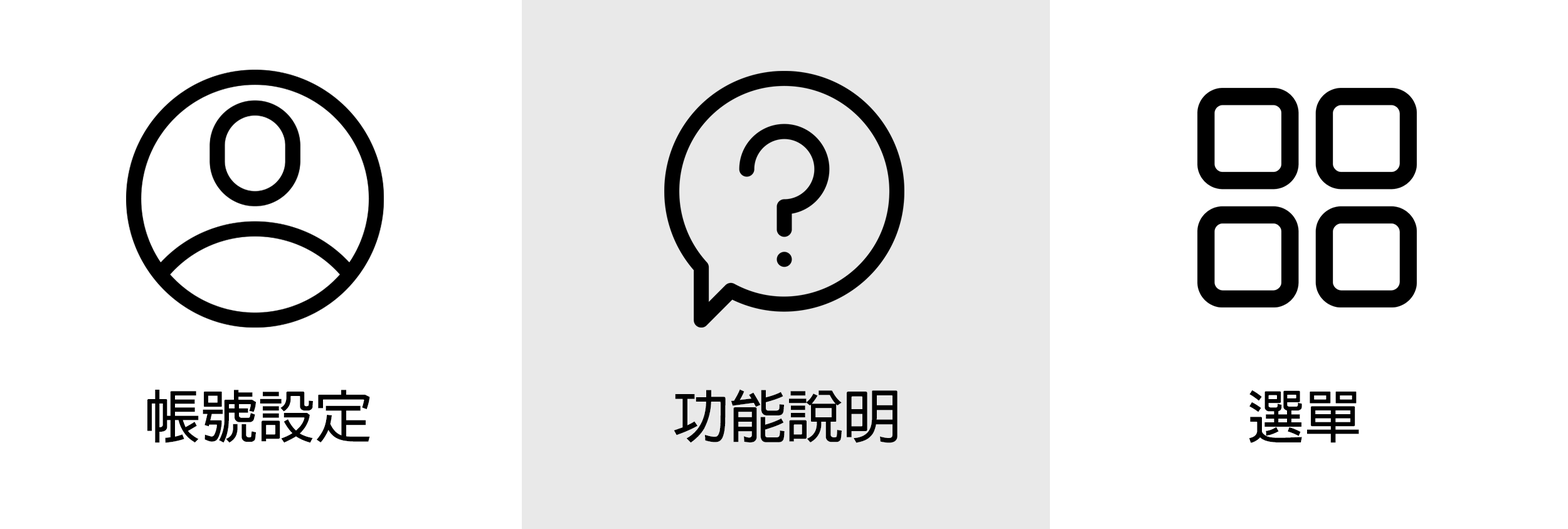
<style>
.page{position:relative;width:1568px;height:529px;background:#ffffff}
.page>*{position:absolute;margin:0}
.t1{font:57.1px "AdobeFanHeitiStd-Bold";color:#000000}
</style>
<div class="page">
<p class="t1" style="left:147px;top:389px;width:223px;height:54px">帳號設定</p>
<p class="t1" style="left:674px;top:389px;width:224px;height:54px">功能說明</p>
<p class="t1" style="left:1249px;top:389px;width:110px;height:54px">選單</p>
</div>
